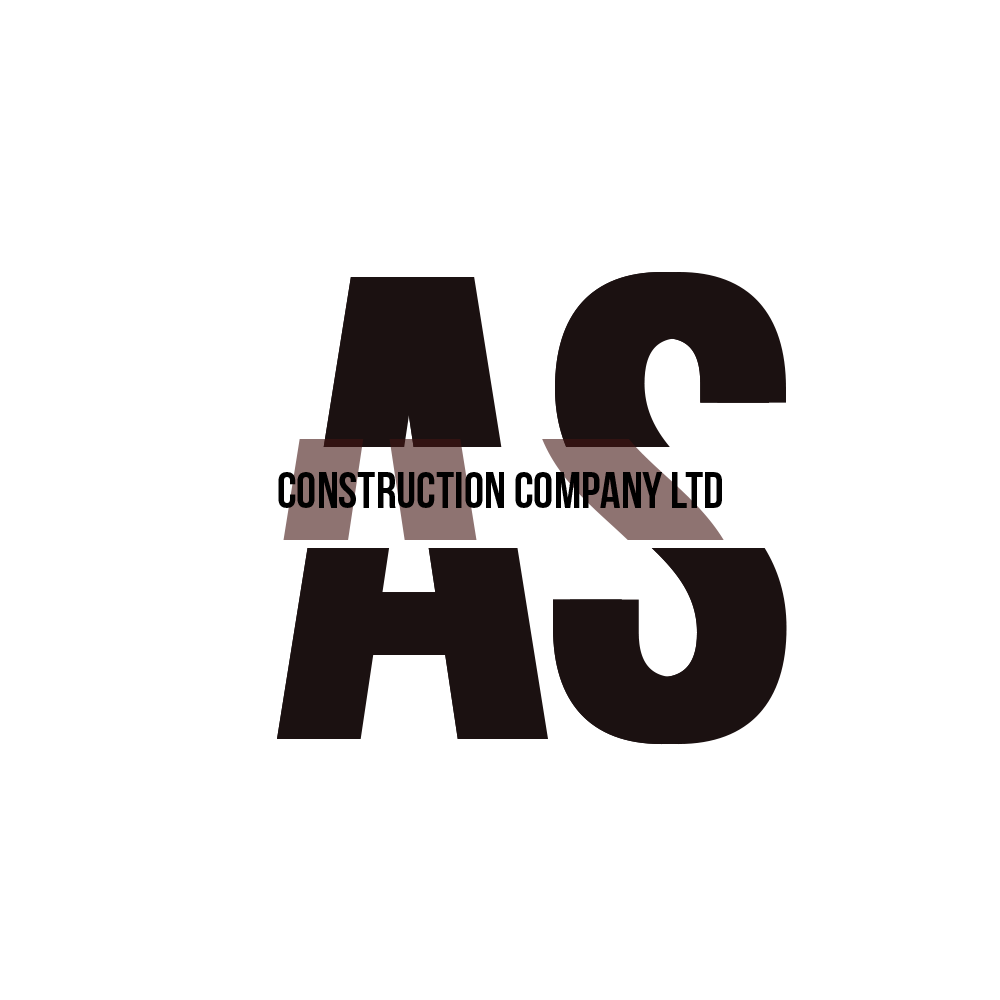
<style>
.page{position:relative;width:1000px;height:1000px;background:#ffffff}
.page>*{position:absolute;margin:0}
.t1{font:51px "BebasNeue";color:#000000;text-transform:uppercase}
</style>
<div class="page">
<p class="t1" style="left:278px;top:472px;width:444px;height:36px">construction company ltd</p>
</div>
